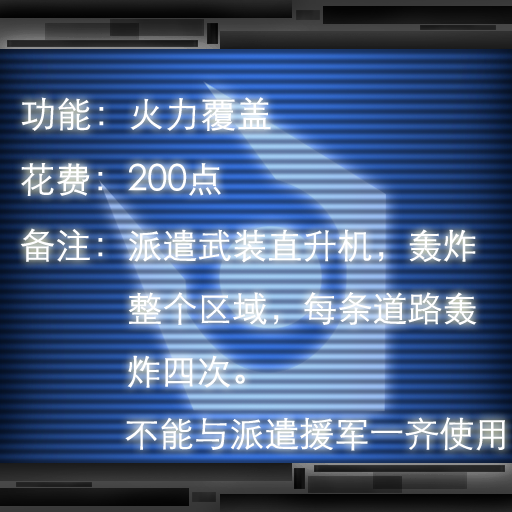
<style>
.page{position:relative;width:512px;height:512px}
.page>*{position:absolute;margin:0}
.t1{font:36px "STXihei";color:#ffffff}
.t2{font:35px "STXihei";color:#ffffff}
</style>
<div class="page">
<p class="t1" style="left:21px;top:97px;width:250px;height:34px">功能：火力覆盖</p>
<p class="t1" style="left:21px;top:163px;width:200px;height:33px">花费：200点</p>
<p class="t2" style="left:20px;top:228px;width:485px;height:223px"><span class="t1">备注：</span>派遣武装直升机，轰炸<br>            整个区域，每条道路轰<br>            炸四次。<br>            不能与派遣援军一齐使用</p>
</div>
